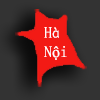
<style>
.page{position:relative;width:100px;height:100px;background:#333333}
.page>*{position:absolute;margin:0}
.t1{font:16px "SimSun";color:#ffffff}
.t2{font:16px "TimesNewRomanPSMT";color:#ffffff}
</style>
<div class="page">
<p class="t1" style="left:44px;top:27px;width:23px;height:33px">Hà<br>N<span class="t2">ộ</span>i</p>
</div>
